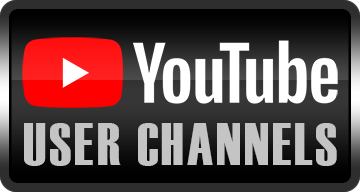
<style>
.page{position:relative;width:360px;height:192px}
.page>*{position:absolute;margin:0}
.t1{font:59px "Haettenschweiler";letter-spacing:0.05em;color:#c4c4c4}
</style>
<div class="page">
<p class="t1" style="left:24px;top:123px;width:313px;height:43px">USER CHANNELS</p>
</div>
